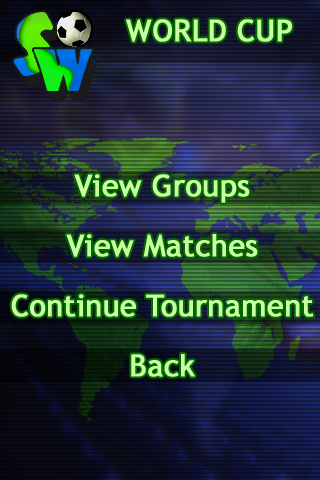
<style>
.page{position:relative;width:320px;height:480px}
.page>*{position:absolute;margin:0}
.t1{font:30px "TrebuchetMS";color:#c8ffa0;font-weight:bold}
.t2{font:30px/60px "TrebuchetMS";color:#c8ffa0;font-weight:bold}
</style>
<div class="page">
<p class="t1" style="left:126px;top:19px;width:166px;height:23px">WORLD CUP</p>
<p class="t2" style="left:11px;top:174px;width:303px;height:203px;text-align:center">View Groups<br>View Matches<br>Continue Tournament<br>Back</p>
</div>
